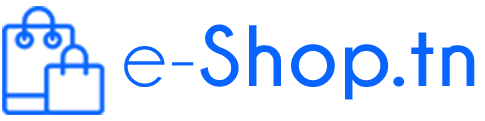
<style>
.page{position:relative;width:485px;height:121px;background:#ffffff}
.page>*{position:absolute;margin:0}
.t1{font:86.6px "Champagne&Limousines-Bold";letter-spacing:0.04em;color:#0764ff}
.t2{font:86.6px "Champagne&Limousines";letter-spacing:0.04em;color:#0764ff}
</style>
<div class="page">
<p class="t1" style="left:124px;top:24px;width:351px;height:76px"><span class="t2">e-</span>Shop.tn</p>
</div>
